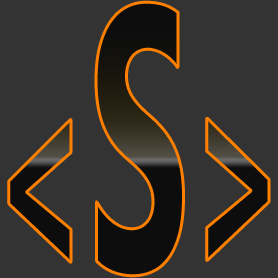
<style>
.page{position:relative;width:278px;height:278px;background:#333333}
.page>*{position:absolute;margin:0}
.t1{font:283.1px "Gadugi-Bold";scale:0.48 1}
.t2{font:377.5px "Gadugi-Bold";scale:0.48 1}
</style>
<div class="page">
<p class="t1" style="left:8px;top:2px;width:261px;height:274px">&lt;<span class="t2">S</span>&gt;</p>
</div>
